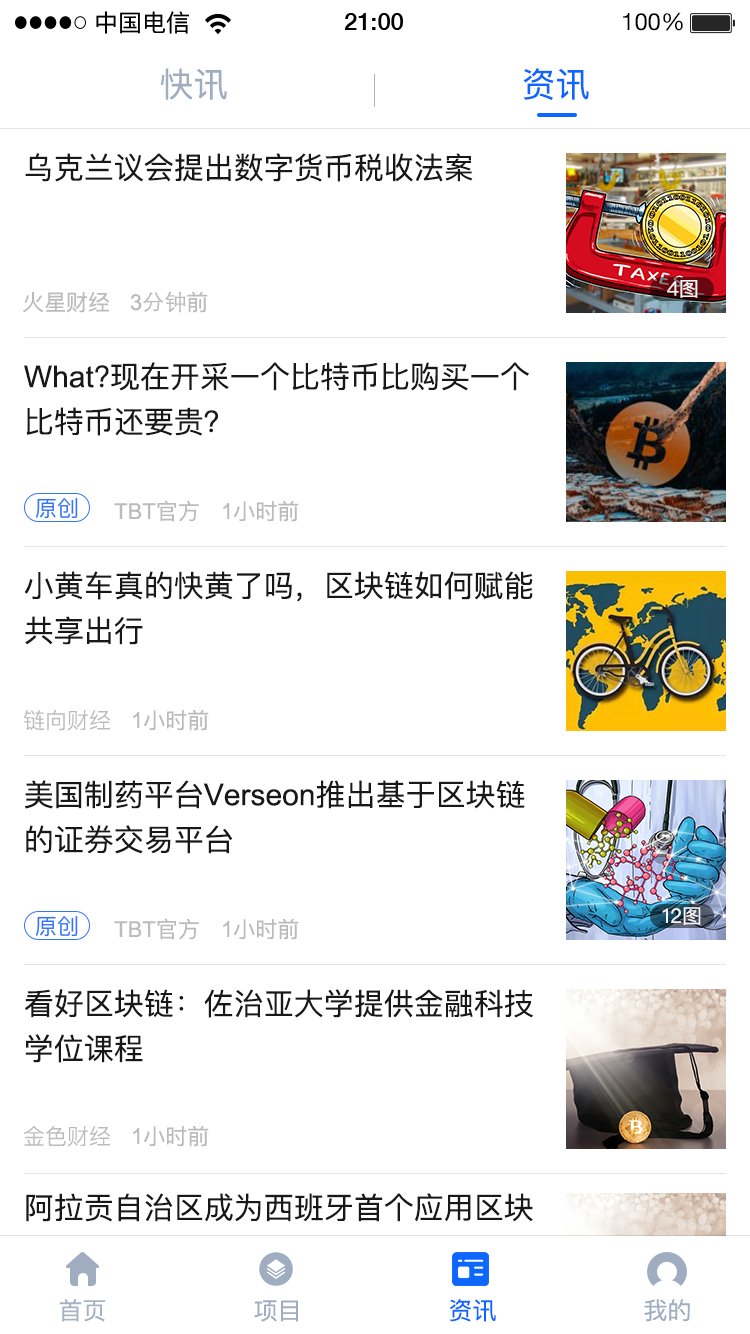
<style>
.page{position:relative;width:750px;height:1334px;background:#ffffff}
.page>*{position:absolute;margin:0}
.t1{font:23.8px "PingFangHK-Regular";letter-spacing:-0.001em;color:#000000}
.t2{font:23.8px "HelveticaNeue-Medium";color:#000000}
.t3{font:23.8px "HelveticaNeue";color:#000000}
.t4{font:34px "PingFangSC-Regular";color:#a0acc0}
.t5{font:34px "PingFangSC-Regular";color:#0d67ff}
.t6{font:30px "PingFangSC-Regular";color:#181818;text-transform:uppercase}
.t7{font:20px "PingFangSC-Regular";color:#f3f3f3;text-transform:uppercase}
.t8{font:22px "PingFangSC-Regular";color:#bbbbbb;text-transform:uppercase}
.t9{font:22px "STHeitiSC-Light";color:#bbbbbb;text-transform:uppercase}
.t10{font:22px "ArialMT";color:#bbbbbb;text-transform:uppercase}
.t11{font:30px/45px "PingFangSC-Regular";color:#181818;text-transform:uppercase}
.t12{font:30px/45px "ArialMT";color:#181818;text-transform:uppercase}
.t13{font:30px/45px "ArialMT";color:#181818}
.t14{font:22px "PingFangSC-Regular";letter-spacing:-0.001em;color:#3574fa}
.t15{font:22px "PingFangSC-Light";color:#bbbbbb;text-transform:uppercase}
.t16{font:24px "PingFangSC-Regular";color:#a7b2c4}
.t17{font:24px "PingFangSC-Regular";color:#a0acc0}
.t18{font:24px "PingFangSC-Regular";color:#0d67ff}
</style>
<div class="page">
<p class="t1" style="left:96px;top:11px;width:93px;height:23px">中国电信</p>
<p class="t2" style="left:344px;top:13px;width:59px;height:17px">21:00</p>
<p class="t3" style="left:623px;top:12px;width:60px;height:19px">100%</p>
<p class="t4" style="left:160px;top:68px;width:67px;height:32px">快讯</p>
<p class="t5" style="left:523px;top:68px;width:66px;height:32px">资讯</p>
<p class="t6" style="left:25px;top:153px;width:448px;height:29px">乌克兰议会提出数字货币税收法案</p>
<p class="t7" style="left:667px;top:280px;width:31px;height:18px">4图</p>
<p class="t8" style="left:23px;top:292px;width:87px;height:21px">火星财经</p>
<p class="t9" style="left:130px;top:291px;width:78px;height:22px"><span class="t10">3</span>分钟<span class="t8">前</span></p>
<p class="t11" style="left:24px;top:362px;width:505px;height:74px"><span class="t12">w</span><span class="t13">hat</span>?现在开采一个比特币比购买一个<br>比特币还要贵？</p>
<p class="t14" style="left:36px;top:498px;width:42px;height:21px">原创</p>
<p class="t10" style="left:114px;top:500px;width:85px;height:22px">tbt<span class="t8">官方</span></p>
<p class="t8" style="left:223px;top:500px;width:76px;height:22px"><span class="t10">1</span>小时前</p>
<p class="t11" style="left:24px;top:571px;width:509px;height:74px">小黄车真的快黄了吗，区块链如何赋能<br>共享出行</p>
<p class="t15" style="left:23px;top:710px;width:87px;height:21px">链向财经</p>
<p class="t8" style="left:133px;top:709px;width:76px;height:22px"><span class="t10">1</span>小时前</p>
<p class="t11" style="left:25px;top:780px;width:500px;height:74px">美国制药平台<span class="t12">V</span><span class="t13">erseon</span>推出基于区块链<br>的证券交易平台</p>
<p class="t14" style="left:36px;top:916px;width:42px;height:21px">原创</p>
<p class="t10" style="left:114px;top:918px;width:85px;height:22px">tbt<span class="t8">官方</span></p>
<p class="t8" style="left:223px;top:918px;width:76px;height:22px"><span class="t10">1</span>小时前</p>
<p class="t7" style="left:662px;top:907px;width:39px;height:18px">12图</p>
<p class="t11" style="left:25px;top:989px;width:508px;height:74px">看好区块链：佐治亚大学提供金融科技<br>学位课程</p>
<p class="t15" style="left:24px;top:1125px;width:86px;height:22px">金色财经</p>
<p class="t8" style="left:133px;top:1125px;width:76px;height:22px"><span class="t10">1</span>小时前</p>
<p class="t11" style="left:24px;top:1193px;width:509px;height:74px">阿拉贡自治区成为西班牙首个应用区块<br>链的自治区</p>
<p class="t16" style="left:59px;top:1299px;width:47px;height:23px">首页</p>
<p class="t17" style="left:254px;top:1300px;width:44px;height:22px">项目</p>
<p class="t18" style="left:450px;top:1299px;width:46px;height:23px">资讯</p>
<p class="t17" style="left:644px;top:1299px;width:46px;height:23px">我的</p>
</div>
